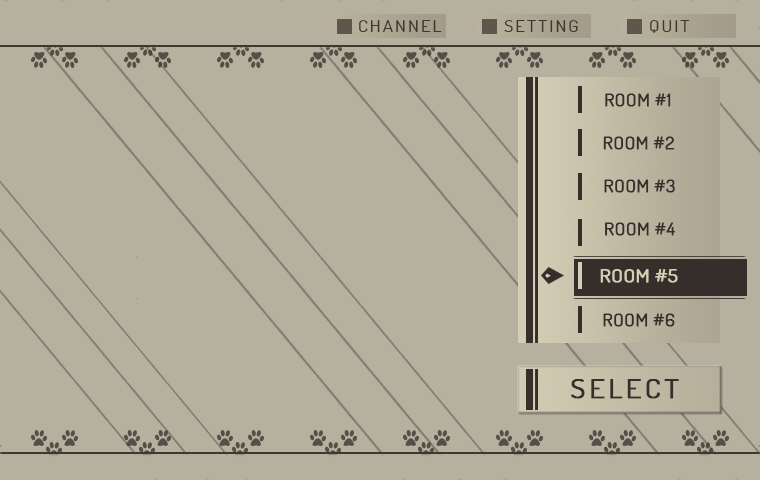
<style>
.page{position:relative;width:760px;height:480px;background:#b6b19f}
.page>*{position:absolute;margin:0}
.t1{font:16px "Dosis-Book";letter-spacing:0.1em;color:#3d392e;scale:1.2 1}
.t2{font:16.5px "Dosis-Book";color:#362e2b;font-weight:bold;scale:1.17 1}
.t3{font:18px "Dosis-Book";color:#d4ceb6;font-weight:bold;scale:1.17 1}
.t4{font:25px "Dosis-Book";letter-spacing:0.1em;color:#362e2b;font-weight:bold;scale:1.2 1}
</style>
<div class="page">
<p class="t1" style="left:359px;top:20px;width:83px;height:12px">CHANNEL</p>
<p class="t1" style="left:504px;top:20px;width:74px;height:12px">SETTING</p>
<p class="t1" style="left:650px;top:20px;width:40px;height:13px">QUIT</p>
<p class="t2" style="left:605px;top:93px;width:66px;height:14px">ROOM #1</p>
<p class="t2" style="left:603px;top:136px;width:72px;height:14px">ROOM #2</p>
<p class="t2" style="left:604px;top:179px;width:71px;height:14px">ROOM #3</p>
<p class="t2" style="left:605px;top:222px;width:70px;height:14px">ROOM #4</p>
<p class="t3" style="left:600px;top:269px;width:78px;height:14px">ROOM #5</p>
<p class="t2" style="left:603px;top:313px;width:72px;height:14px">ROOM #6</p>
<p class="t4" style="left:571px;top:379px;width:108px;height:20px">SELECT</p>
</div>
